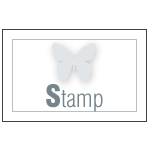
<style>
.page{position:relative;width:150px;height:150px;background:#ffffff}
.page>*{position:absolute;margin:0}
.t1{font:30px "Swiss721BT-BlackCondensed";color:#76858d}
.t2{font:24px "Swiss721BT-LightCondensed";color:#76858d}
</style>
<div class="page">
<p class="t1" style="left:46px;top:84px;width:14px;height:24px">S</p>
<p class="t2" style="left:61px;top:90px;width:42px;height:22px">tamp</p>
</div>
